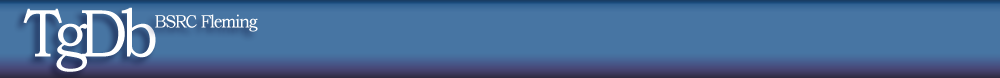
<style>
.page{position:relative;width:1000px;height:78px;background:#4775a3}
.page>*{position:absolute;margin:0}
.t1{font:68px "BookmanOldStyle";letter-spacing:-0.13em;color:#ffffff;scale:0.9 1}
.t2{font:18px "BookmanOldStyle";letter-spacing:-0.065em;color:#ffffff;scale:0.9 1}
</style>
<div class="page">
<p class="t1" style="left:23px;top:7px;width:133px;height:65px">TgDb</p>
<p class="t2" style="left:155px;top:14px;width:103px;height:18px">BSRC Fleming</p>
</div>
